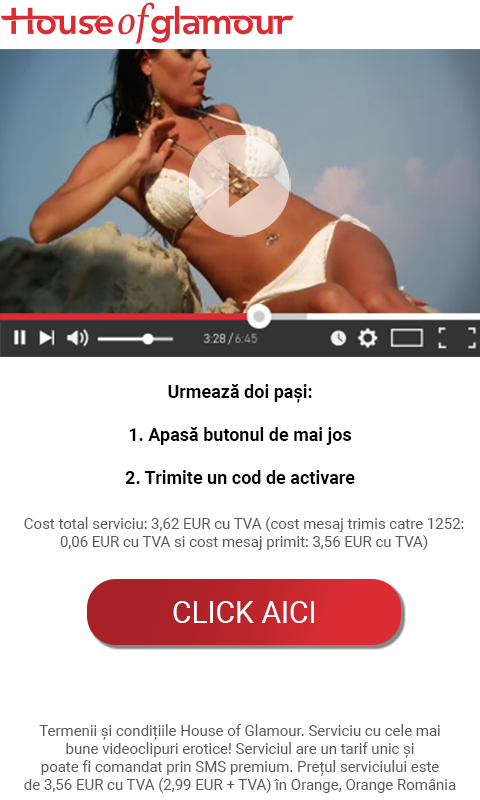
<style>
.page{position:relative;width:480px;height:800px;background:#ffffff}
.page>*{position:absolute;margin:0}
.t1{font:18px "Roboto-Bold";color:#000000}
.t2{font:15px "Roboto-Regular";color:#595959}
.t3{font:30px "Roboto-Regular";color:#ffffff}
</style>
<div class="page">
<p class="t1" style="left:125px;top:384px;width:230px;height:100px;text-align:center">Urmează doi pași:<br><br>1. Apasă butonul de mai jos<br><br>2. Trimite un cod de activare</p>
<p class="t2" style="left:24px;top:517px;width:440px;height:33px;text-align:center">Cost total serviciu: 3,62 EUR cu TVA (cost mesaj trimis catre 1252:<br>0,06 EUR cu TVA si cost mesaj primit: 3,56 EUR cu TVA)</p>
<p class="t3" style="left:173px;top:601px;width:141px;height:22px">CLICK AICI</p>
<p class="t2" style="left:24px;top:724px;width:432px;height:69px;text-align:center">Termenii și condițiile House of Glamour. Serviciu cu cele mai<br>bune videoclipuri erotice! Serviciul are un tarif unic și<br>poate fi comandat prin SMS premium. Prețul serviciului este<br>de 3,56 EUR cu TVA (2,99 EUR + TVA) în Orange, Orange România</p>
</div>
